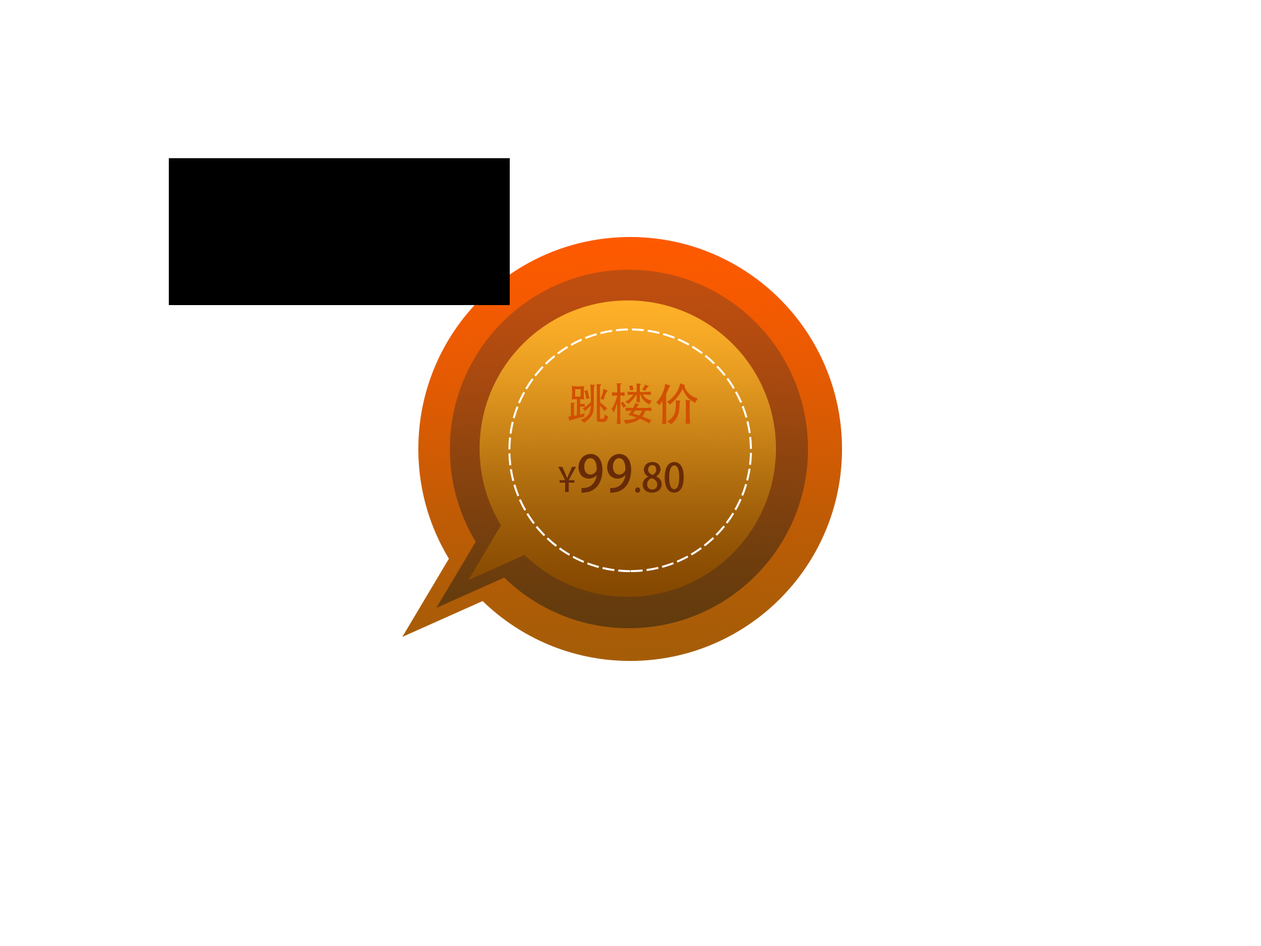
<style>
.page{position:relative;width:1261px;height:946px;background:#ffffff}
.page>*{position:absolute;margin:0}
.t1{font:44.5px "AdobeHeitiStd-Regular";color:#d25001}
.t2{font:50px "AdobeHeitiStd-Regular";color:#682b07}
.t3{font:33.4px "AdobeHeitiStd-Regular";color:#682b07}
.t4{font:38.9px "AdobeHeitiStd-Regular";color:#682b07}
</style>
<div class="page">
<p class="t1" style="left:568px;top:383px;width:130px;height:41px">跳楼价</p>
<p class="t2" style="left:558px;top:454px;width:126px;height:38px"><span class="t3">¥</span>99<span class="t3">.</span><span class="t4">80</span></p>
</div>
